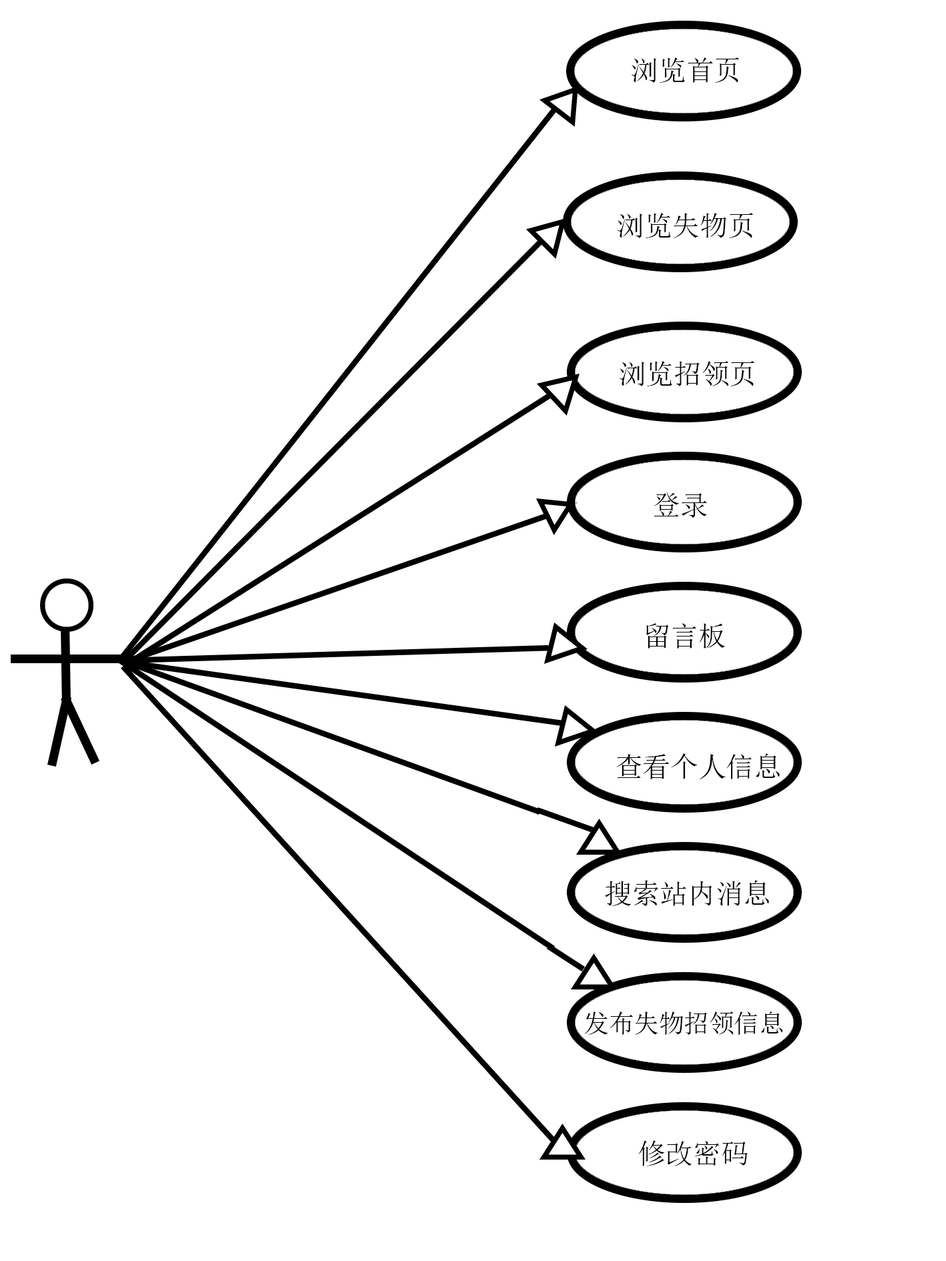
<style>
.page{position:relative;width:946px;height:1261px;background:#ffffff}
.page>*{position:absolute;margin:0}
.t1{font:27.8px "SimSun";color:#010101}
.t2{font:27.8px "SimSun";color:#000000}
.t3{font:25px "SimSun";color:#000000}
</style>
<div class="page">
<p class="t1" style="left:631px;top:57px;width:108px;height:26px">浏览首页</p>
<p class="t2" style="left:617px;top:213px;width:136px;height:25px">浏览失物页</p>
<p class="t2" style="left:619px;top:361px;width:136px;height:25px">浏览招领页</p>
<p class="t2" style="left:653px;top:492px;width:54px;height:26px">登录</p>
<p class="t2" style="left:645px;top:623px;width:80px;height:26px">留言板</p>
<p class="t2" style="left:616px;top:753px;width:163px;height:26px">查看个人信息</p>
<p class="t2" style="left:605px;top:880px;width:164px;height:26px">搜索站内消息</p>
<p class="t3" style="left:585px;top:1012px;width:198px;height:23px">发布失物招领信息</p>
<p class="t2" style="left:638px;top:1140px;width:109px;height:26px">修改密码</p>
</div>
